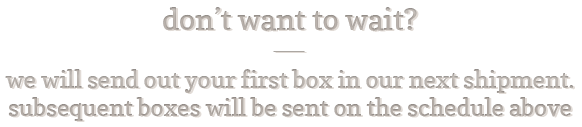
<style>
.page{position:relative;width:582px;height:127px;background:#ffffff}
.page>*{position:absolute;margin:0}
.t1{font:30px "Copse";color:#bdb6b1}
.t2{font:24px "Copse";color:#bdb6b1}
</style>
<div class="page">
<p class="t1" style="left:163px;top:7px;width:254px;height:24px">don’t want to wait?</p>
<p class="t2" style="left:5px;top:69px;width:568px;height:52px;text-align:center"><span class="t1"><br></span><br>we will send out your first box in our next shipment. subsequent boxes will be sent on the schedule above</p>
</div>
